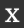
<style>
.page{position:relative;width:24px;height:28px;background:#333333}
.page>*{position:absolute;margin:0}
.t1{font:24px "Merriweather-Regular";color:#ffffff}
</style>
<div class="page">
<p class="t1" style="left:5px;top:8px;width:15px;height:14px">x</p>
</div>
